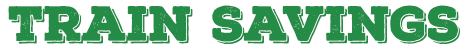
<style>
.page{position:relative;width:468px;height:50px;background:#ffffff}
.page>*{position:absolute;margin:0}
.t1{font:47.6px "NexaRustSlab-BlackShadow01";color:#258c47}
</style>
<div class="page">
<p class="t1" style="left:8px;top:5px;width:452px;height:39px">Train Savings</p>
</div>
